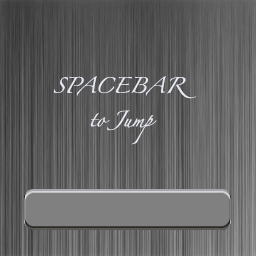
<style>
.page{position:relative;width:256px;height:256px}
.page>*{position:absolute;margin:0}
.t1{font:14px "Zapfino";color:#e7eaf2}
</style>
<div class="page">
<p class="t1" style="left:53px;top:76px;width:143px;height:69px">SPACEBAR <br><br> to Jump</p>
</div>
